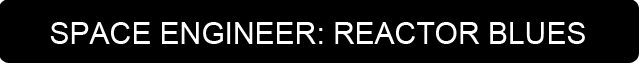
<style>
.page{position:relative;width:640px;height:64px;background:#000000}
.page>*{position:absolute;margin:0}
.t1{font:30px "ArialMT";color:#ffffff;text-transform:uppercase}
</style>
<div class="page">
<p class="t1" style="left:50px;top:22px;width:535px;height:22px">Space Engineer: Reactor Blues</p>
</div>
